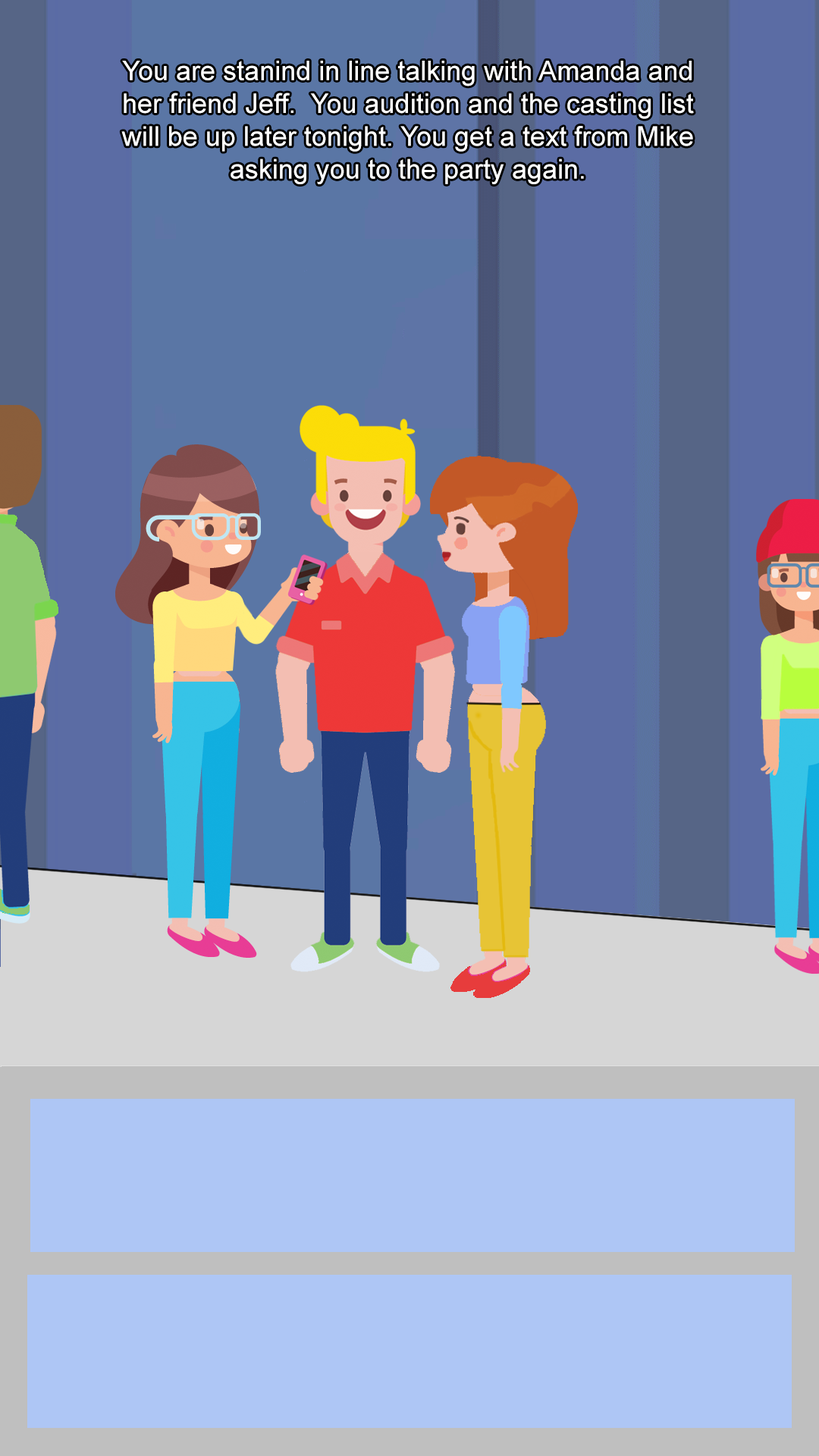
<style>
.page{position:relative;width:819px;height:1456px;background:#aec6f5}
.page>*{position:absolute;margin:0}
.t1{font:27.3px "ArialMT";color:#ffffff}
</style>
<div class="page">
<p class="t1" style="left:121px;top:61px;width:573px;height:123px;text-align:center">You are stanind in line talking with Amanda and her friend Jeff.  You audition and the casting list will be up later tonight. You get a text from Mike asking you to the party again.</p>
</div>
